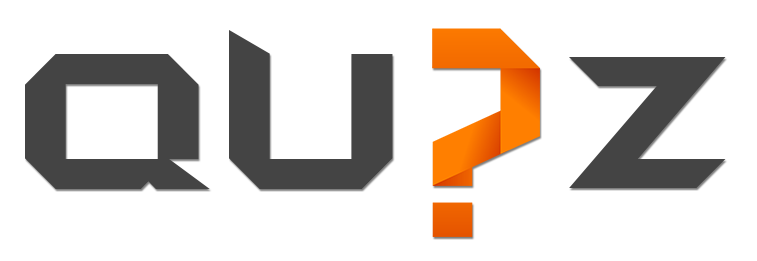
<style>
.page{position:relative;width:757px;height:261px;background:#ffffff}
.page>*{position:absolute;margin:0}
.t1{font:228.6px "BatmanForeverAlternate";color:#444444}
.t2{font:221.8px "BatmanForeverAlternate";color:#444444}
</style>
<div class="page">
<p class="t1" style="left:25px;top:30px;width:368px;height:159px">QU</p>
<p class="t2" style="left:569px;top:57px;width:157px;height:131px">Z</p>
</div>
